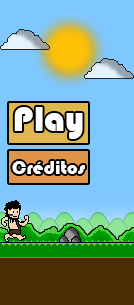
<style>
.page{position:relative;width:134px;height:305px;background:#7fc7ff}
.page>*{position:absolute;margin:0}
.t1{font:36px "Bauhaus93";color:#ffffff}
.t2{font:19.4px "Bauhaus93";color:#ffffff}
</style>
<div class="page">
<p class="t1" style="left:14px;top:107px;width:69px;height:32px">Play</p>
<p class="t2" style="left:12px;top:161px;width:73px;height:13px">Créditos</p>
</div>
